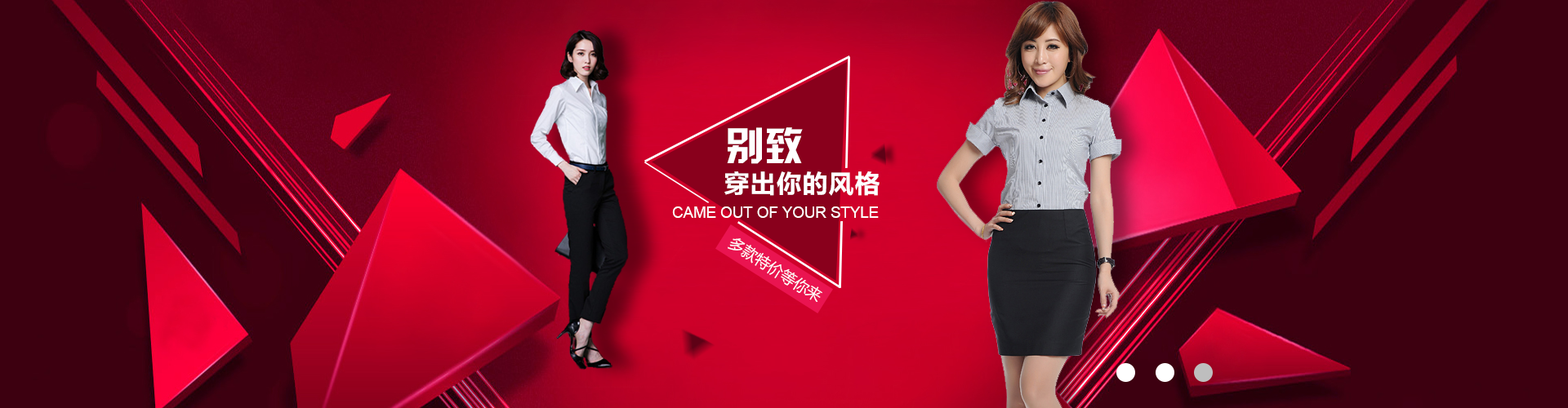
<style>
.page{position:relative;width:1568px;height:408px;background:#3d0010}
.page>*{position:absolute;margin:0}
.t1{font:39.2px "HYk2gj";color:#ffffff;text-transform:uppercase}
.t2{font:26.1px "FZLTCHJW--GB1-0";color:#ffffff;text-transform:uppercase}
.t3{font:15.2px "ArialMT";color:#ffffff;text-transform:uppercase}
.t4{font:15.2px "MicrosoftYaHei";color:#ffffff;text-transform:uppercase}
</style>
<div class="page">
<p class="t1" style="left:727px;top:127px;width:76px;height:37px">别致</p>
<p class="t2" style="left:724px;top:172px;width:156px;height:24px">穿出你的风格</p>
<p class="t3" style="left:672px;top:207px;width:207px;height:11px">Came out of your style</p>
<p class="t4" style="left:728px;top:238px;width:94px;height:64px;rotate:32deg">多款特价等你来</p>
</div>
